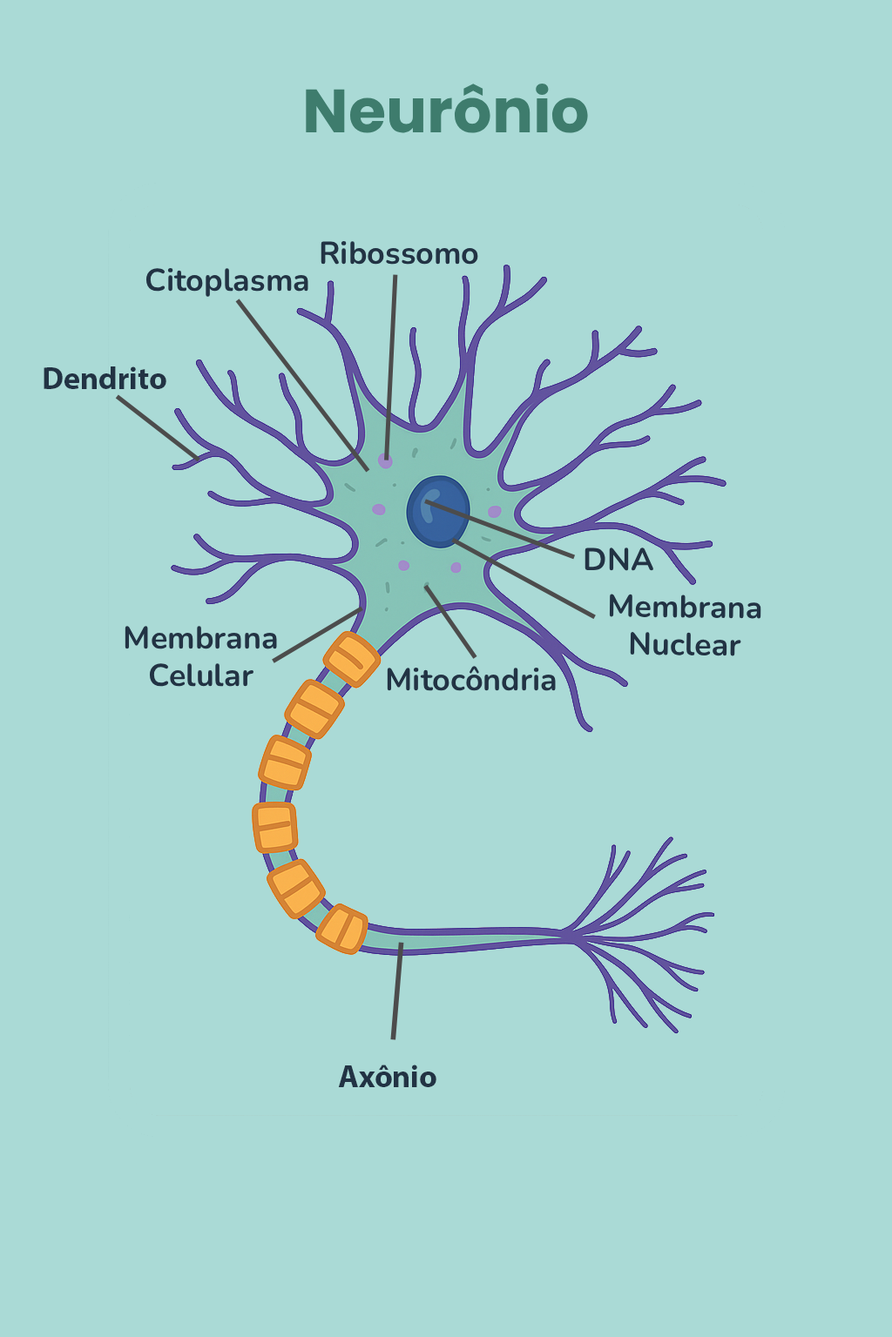
<style>
.page{position:relative;width:892px;height:1337px;background:#aadad6}
.page>*{position:absolute;margin:0}
.t1{font:60.9px "Poppins-Bold";color:#3e7c6d}
.t2{font:31.3px "Nunito-Bold";color:#223344}
.t3{font:31.3px "MyriadPro-Bold";color:#223344}
</style>
<div class="page">
<p class="t1" style="left:306px;top:83px;width:282px;height:50px">Neurônio</p>
<p class="t2" style="left:320px;top:241px;width:158px;height:24px">Ribossomo</p>
<p class="t2" style="left:145px;top:268px;width:163px;height:29px">Citoplasma</p>
<p class="t3" style="left:44px;top:367px;width:122px;height:22px">Dendrito</p>
<p class="t2" style="left:584px;top:548px;width:70px;height:23px">DNA</p>
<p class="t2" style="left:609px;top:594px;width:152px;height:63px;rotate:1deg">Membrana Nuclear</p>
<p class="t2" style="left:125px;top:626px;width:152px;height:61px;text-align:center">Membrana Celular</p>
<p class="t2" style="left:387px;top:666px;width:169px;height:25px">Mitocôndria</p>
<p class="t3" style="left:338px;top:1065px;width:98px;height:23px">Axônio</p>
</div>
